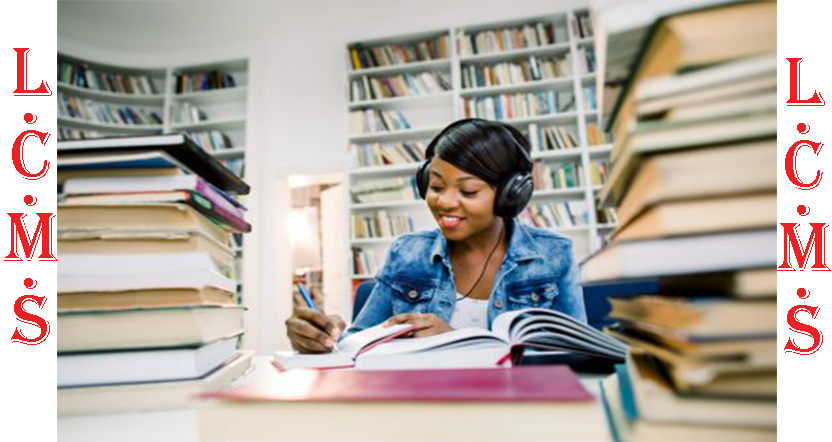
<style>
.page{position:relative;width:832px;height:442px}
.page>*{position:absolute;margin:0}
.t1{font:72px/27.6px "Algerian";letter-spacing:0.02em;color:#ed2024;text-transform:uppercase}
</style>
<div class="page">
<p class="t1" style="left:4px;top:48px;width:54px;height:297px;text-align:center">L<br>.<br><br>c<br>.<br><br>M<br>.<br><br>S</p>
<p class="t1" style="left:777px;top:58px;width:54px;height:297px;text-align:center">L<br>.<br><br>c<br>.<br><br>M<br>.<br><br>S</p>
</div>
